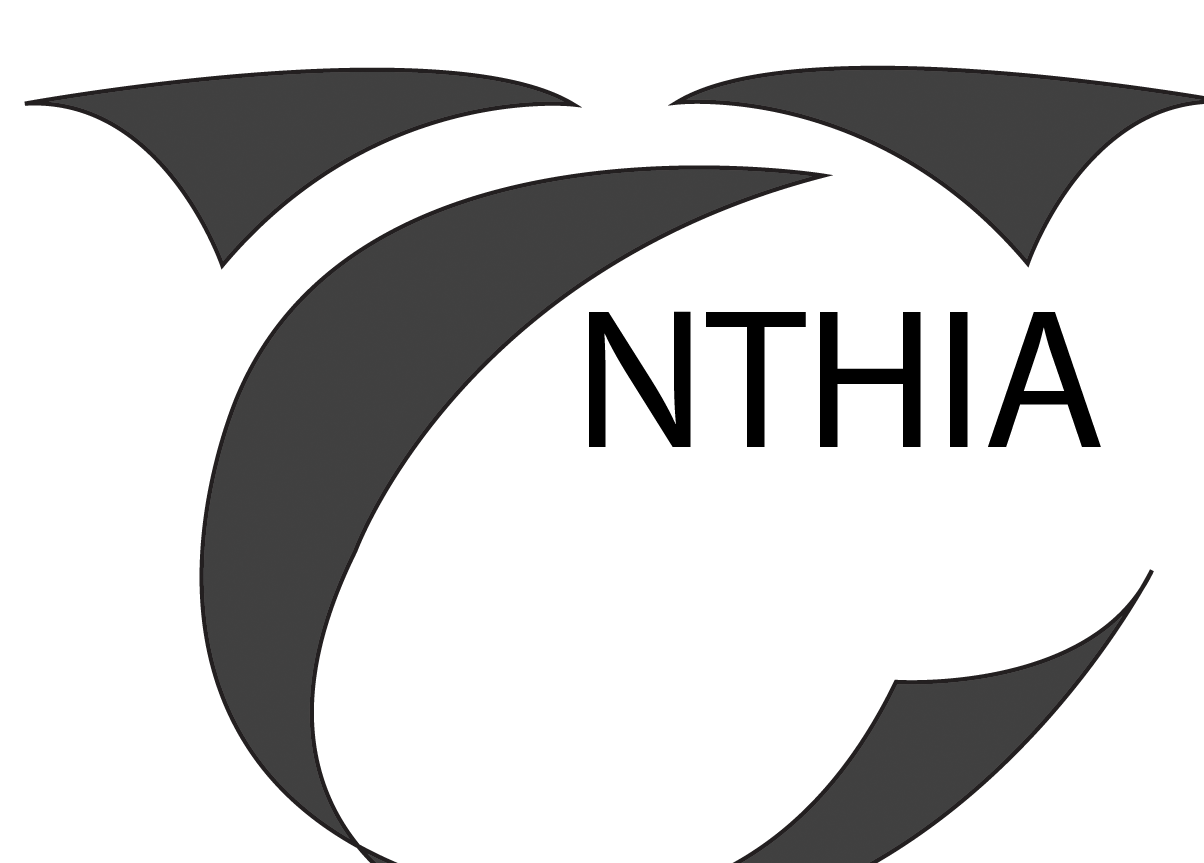
<style>
.page{position:relative;width:1204px;height:863px;background:#ffffff}
.page>*{position:absolute;margin:0}
.t1{font:200px "MyriadPro-Regular";color:#000000}
</style>
<div class="page">
<p class="t1" style="left:589px;top:311px;width:512px;height:136px">NTHIA</p>
</div>
